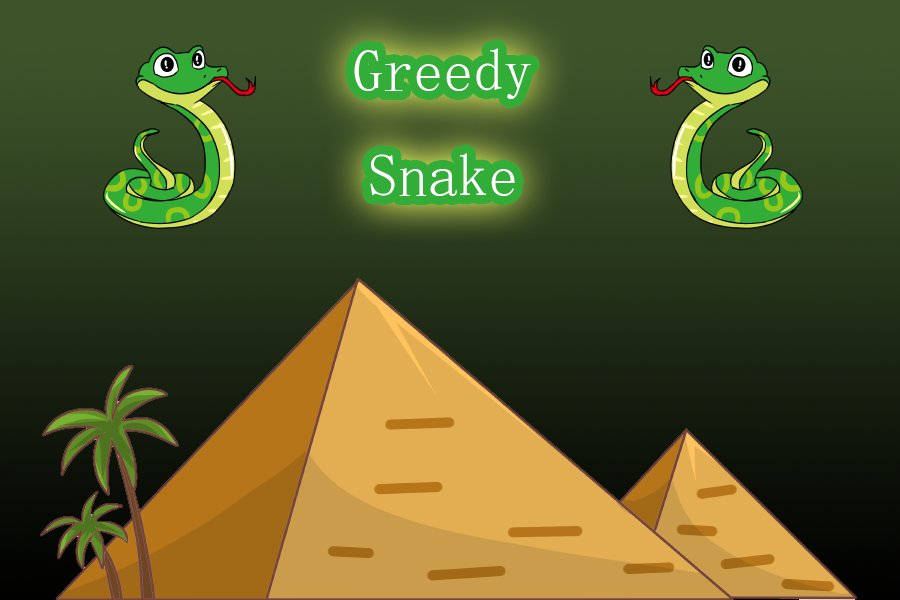
<style>
.page{position:relative;width:900px;height:600px}
.page>*{position:absolute;margin:0}
.t1{font:60px "SimSun";color:#ffffff}
</style>
<div class="page">
<p class="t1" style="left:354px;top:48px;width:177px;height:148px;text-align:center">Greedy<br>Snake</p>
</div>
